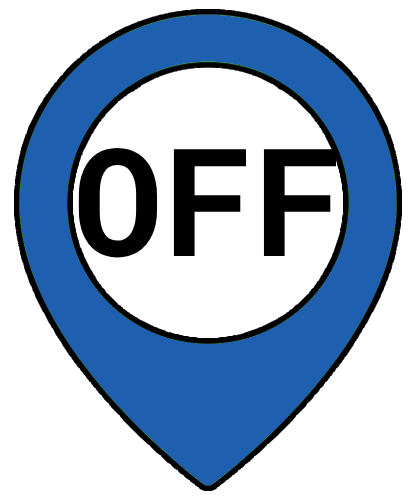
<style>
.page{position:relative;width:417px;height:500px;background:#ffffff}
.page>*{position:absolute;margin:0}
.t1{font:150px "RobotoMono-Bold";color:#000000}
</style>
<div class="page">
<p class="t1" style="left:78px;top:147px;width:259px;height:111px">OFF</p>
</div>
